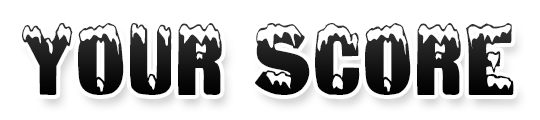
<style>
.page{position:relative;width:540px;height:120px;background:#ffffff}
.page>*{position:absolute;margin:0}
.t1{font:90px "Ice-Snow";letter-spacing:0.05em;color:#151515}
</style>
<div class="page">
<p class="t1" style="left:22px;top:23px;width:492px;height:72px">YOUR SCORE</p>
</div>
